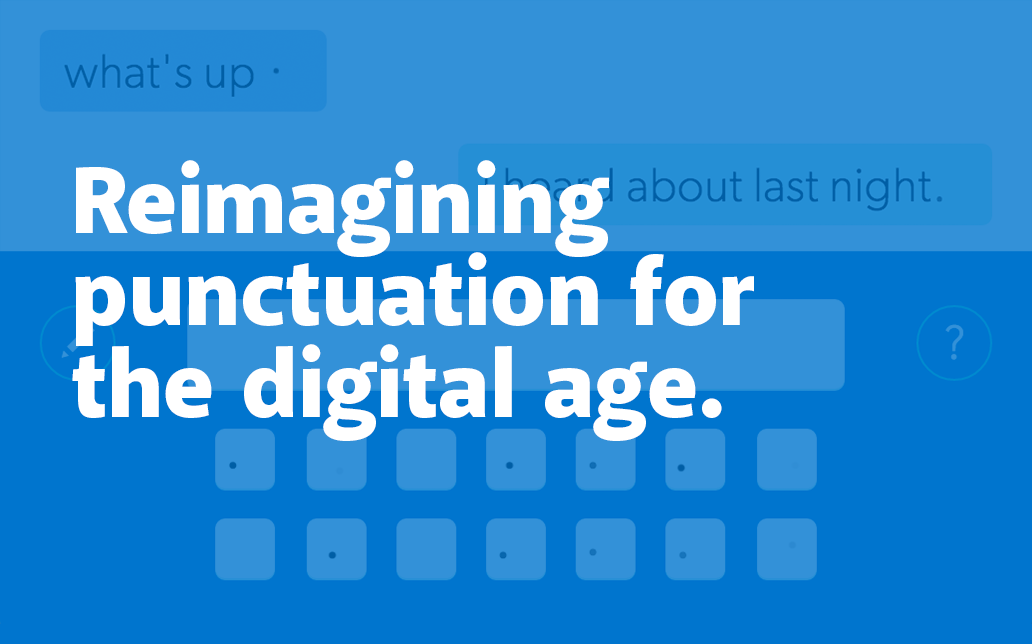
<style>
.page{position:relative;width:1032px;height:644px;background:#3391d8}
.page>*{position:absolute;margin:0}
.t1{font:96.8px/92px "AkagiPro-Black";color:#ffffff}
</style>
<div class="page">
<p class="t1" style="left:72px;top:160px;width:682px;height:281px">Reimagining<br>punctuation for<br>the digital age.</p>
</div>
